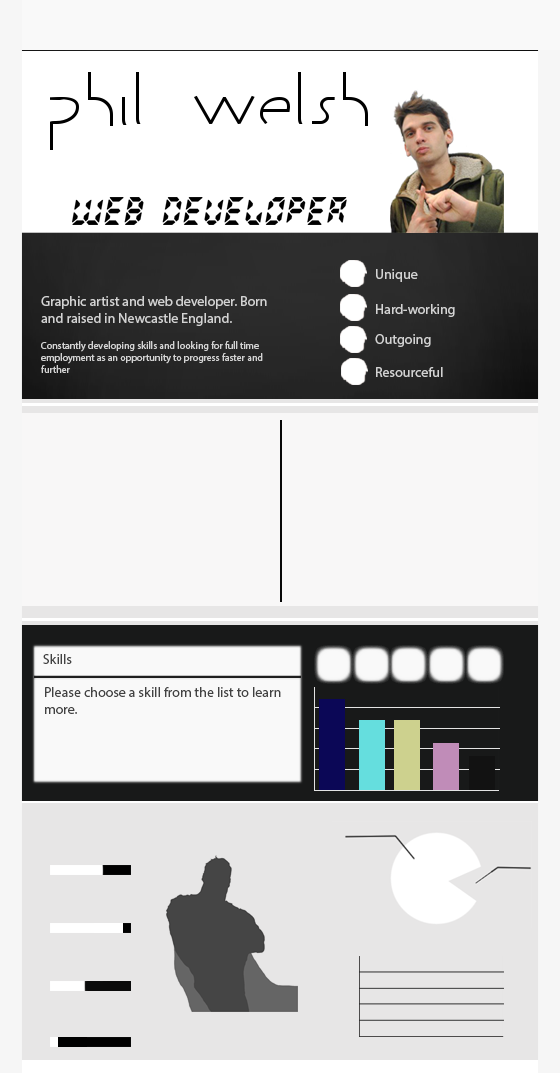
<style>
.page{position:relative;width:560px;height:1073px;background:#e7e6e6}
.page>*{position:absolute;margin:0}
.t1{font:14px "MyriadPro-Regular";color:#d3d3d3}
.t2{font:10px "MyriadPro-Regular";color:#d3d3d3}
</style>
<div class="page">
<p class="t1" style="left:376px;top:269px;width:42px;height:13px">Unique</p>
<p class="t1" style="left:41px;top:296px;width:226px;height:30px">Graphic artist and web developer. Born and raised in Newcastle England.</p>
<p class="t1" style="left:376px;top:304px;width:79px;height:13px">Hard-working</p>
<p class="t2" style="left:41px;top:341px;width:222px;height:32px">Constantly developing skills and looking for full time employment as an opportunity to progress faster and further</p>
<p class="t1" style="left:375px;top:334px;width:56px;height:13px">Outgoing</p>
<p class="t1" style="left:376px;top:367px;width:67px;height:10px">Resourceful</p>
</div>
